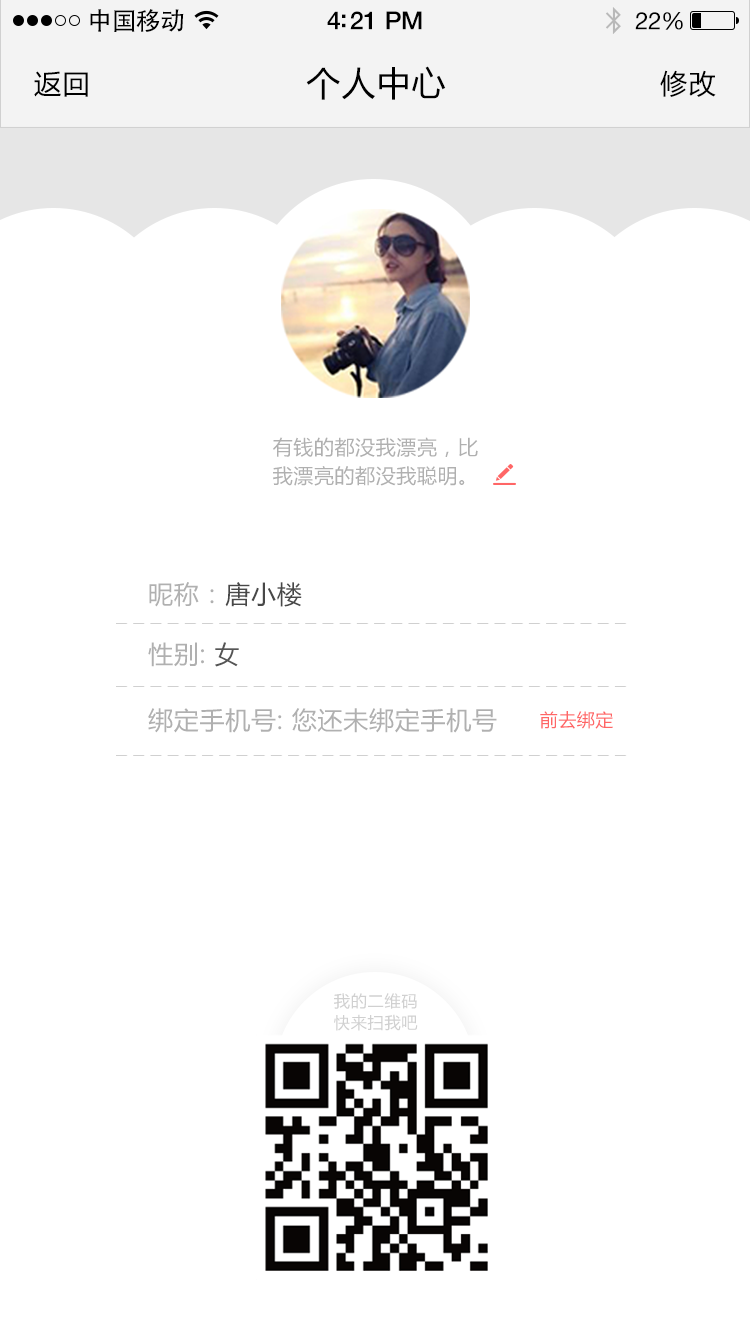
<style>
.page{position:relative;width:750px;height:1334px;background:#ffffff}
.page>*{position:absolute;margin:0}
.t1{font:25px "AdobeHeitiStd-Regular";letter-spacing:-0.025em;color:#000000}
.t2{font:25px "HelveticaNeue-Medium";letter-spacing:-0.02em;color:#000000}
.t3{font:24px "HelveticaNeue";letter-spacing:-0.02em;color:#000000}
.t4{font:27px "MicrosoftYaHei";letter-spacing:0.05em;color:#000000}
.t5{font:34px "MicrosoftYaHei";letter-spacing:0.03em;color:#000000}
.t6{font:20px/70px "MicrosoftYaHei";letter-spacing:0.03em;color:#b0b0b0}
.t7{font:25px "MicrosoftYaHei";letter-spacing:0.03em;color:#b0b0b0}
.t8{font:25px "MicrosoftYaHei";letter-spacing:0.03em;color:#484848}
.t9{font:25px "MicrosoftYaHei";letter-spacing:0.03em;color:#555555}
.t10{font:18px "MicrosoftYaHei";letter-spacing:0.03em;color:#ff6666}
.t11{font:16.4px "MicrosoftYaHei";letter-spacing:0.03em;color:#d0d0d0}
</style>
<div class="page">
<p class="t1" style="left:90px;top:9px;width:94px;height:23px">中国移动</p>
<p class="t2" style="left:327px;top:11px;width:95px;height:19px">4:21 PM</p>
<p class="t3" style="left:635px;top:12px;width:48px;height:18px">22%</p>
<p class="t4" style="left:34px;top:71px;width:54px;height:26px">返回</p>
<p class="t5" style="left:306px;top:66px;width:140px;height:34px">个人中心</p>
<p class="t4" style="left:660px;top:70px;width:56px;height:27px">修改</p>
<p class="t6" style="left:273px;top:437px;width:205px;height:49px">有钱的都没我漂亮，比<br>我漂亮的都没我聪明。</p>
<p class="t7" style="left:149px;top:582px;width:153px;height:25px">昵称：<span class="t8">唐小楼</span></p>
<p class="t7" style="left:148px;top:642px;width:91px;height:25px">性别: <span class="t9">女</span></p>
<p class="t7" style="left:148px;top:708px;width:349px;height:25px">绑定手机号: 您还未绑定手机号</p>
<p class="t10" style="left:540px;top:711px;width:73px;height:18px">前去绑定</p>
<p class="t11" style="left:334px;top:993px;width:83px;height:16px">我的二维码</p>
<p class="t11" style="left:334px;top:1014px;width:84px;height:17px">快来扫我吧</p>
</div>
